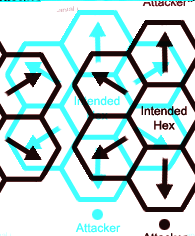
<style>
.page{position:relative;width:195px;height:236px;background:#ffffff}
.page>*{position:absolute;margin:0}
.t1{font:12px "ArialMT"}
</style>
<div class="page">
<p class="t1" style="left:74px;top:95px;width:46px;height:24px;text-align:center">Intended<br>Hex</p>
<p class="t1" style="left:75px;top:222px;width:46px;height:10px">Attacker</p>
</div>
